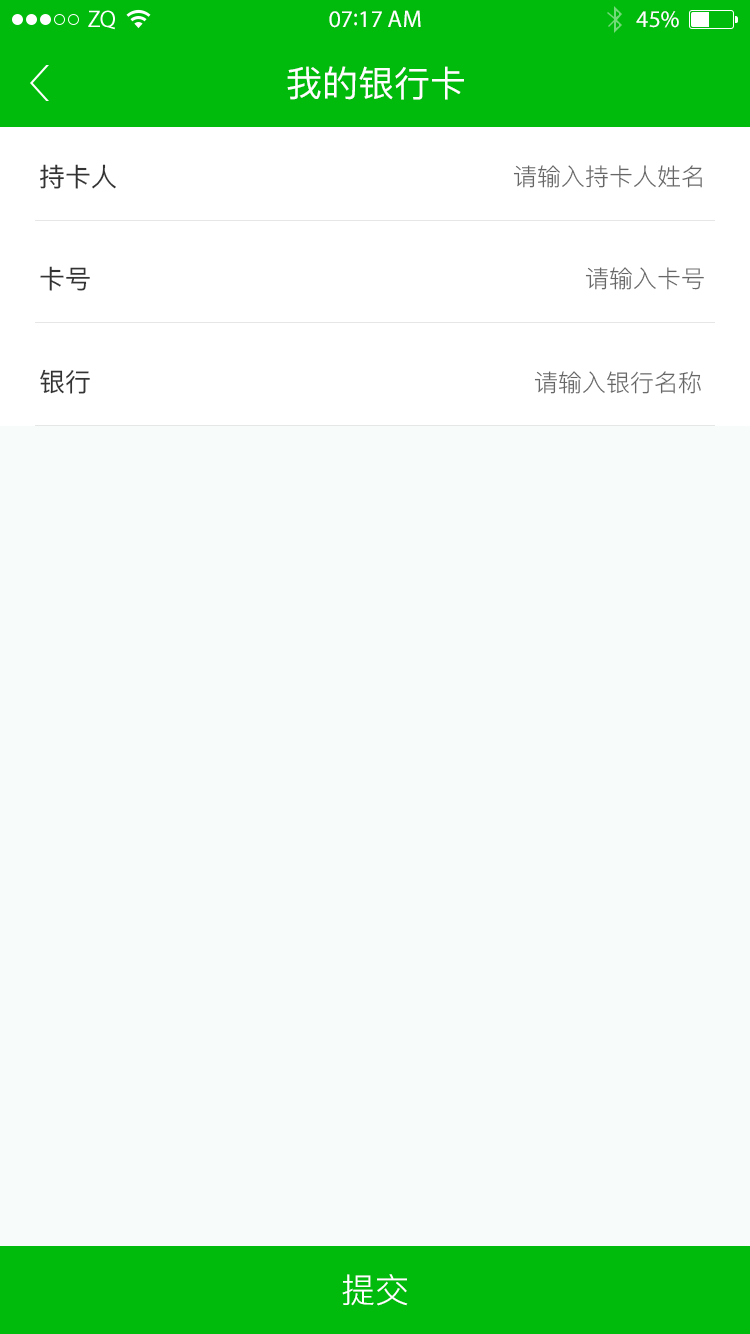
<style>
.page{position:relative;width:750px;height:1334px;background:#f7fcfa}
.page>*{position:absolute;margin:0}
.t1{font:24px "MyriadPro-Regular";color:#ffffff}
.t2{font:36px "PingFang-SC-Medium";color:#ffffff}
.t3{font:26px "PingFang-SC-Medium";color:#333333}
.t4{font:24px "PingFang-SC-Regular";color:#666666}
.t5{font:34px "PingFang-SC-Regular";color:#ffffff}
</style>
<div class="page">
<p class="t1" style="left:329px;top:10px;width:92px;height:18px">07:17 AM</p>
<p class="t1" style="left:636px;top:11px;width:43px;height:17px">45%</p>
<p class="t2" style="left:287px;top:66px;width:177px;height:34px">我的银行卡</p>
<p class="t3" style="left:40px;top:164px;width:76px;height:25px">持卡人</p>
<p class="t4" style="left:513px;top:165px;width:189px;height:23px">请输入持卡人姓名</p>
<p class="t3" style="left:40px;top:266px;width:50px;height:25px">卡号</p>
<p class="t4" style="left:585px;top:267px;width:119px;height:23px">请输入卡号</p>
<p class="t3" style="left:40px;top:369px;width:50px;height:25px">银行</p>
<p class="t4" style="left:534px;top:371px;width:167px;height:23px">请输入银行名称</p>
<p class="t5" style="left:342px;top:1274px;width:66px;height:32px">提交</p>
</div>
